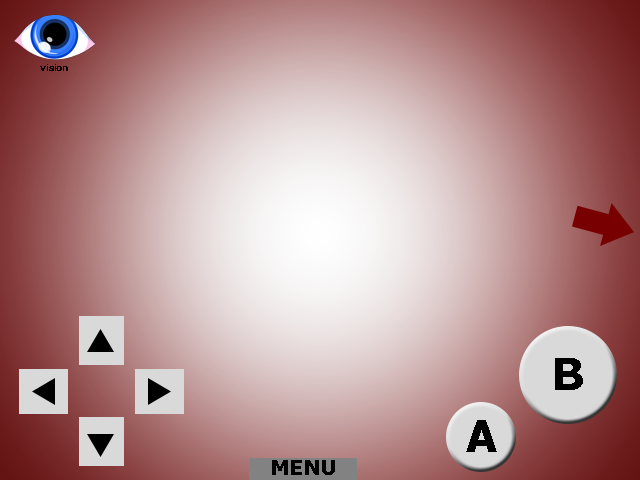
<style>
.page{position:relative;width:640px;height:480px}
.page>*{position:absolute;margin:0}
.t1{font:8.6px "Verdana-Bold";letter-spacing:-0.01em;color:#000000}
.t2{font:43.7px "Verdana-Bold";letter-spacing:-0.01em;color:#000000}
.t3{font:20.4px "Verdana-Bold";letter-spacing:-0.01em;color:#000000}
</style>
<div class="page">
<p class="t1" style="left:40px;top:64px;width:28px;height:7px">vision</p>
<p class="t2" style="left:555px;top:358px;width:28px;height:32px">B</p>
<p class="t2" style="left:466px;top:420px;width:31px;height:32px">A</p>
<p class="t3" style="left:272px;top:460px;width:63px;height:15px">MENU</p>
</div>
